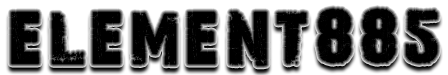
<style>
.page{position:relative;width:448px;height:75px;background:#ffffff}
.page>*{position:absolute;margin:0}
.t1{font:72px "28-Days-Later-Regular";letter-spacing:0.1em;color:#000000}
</style>
<div class="page">
<p class="t1" style="left:11px;top:9px;width:426px;height:57px">ELEMENT885</p>
</div>
